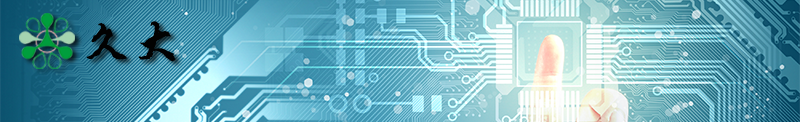
<style>
.page{position:relative;width:800px;height:122px}
.page>*{position:absolute;margin:0}
.t1{font:48px "SingkaibeiEG-Bold-GB";color:#020202;font-weight:bold}
</style>
<div class="page">
<p class="t1" style="left:86px;top:21px;width:90px;height:41px">久大</p>
</div>
